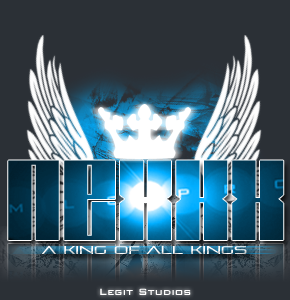
<style>
.page{position:relative;width:290px;height:300px;background:#2b3036}
.page>*{position:absolute;margin:0}
.t1{font:105.4px "Tagmarker";scale:1.28 1}
.t2{font:11.3px "PirulenRg-Regular";scale:1.23 1}
.t3{font:12px "BankGothicBT-Medium";color:#ffffff}
</style>
<div class="page">
<p class="t1" style="left:8px;top:160px;width:276px;height:80px">NexXx</p>
<p class="t2" style="left:41px;top:246px;width:206px;height:8px">A King Of ALL Kings</p>
<p class="t3" style="left:100px;top:288px;width:91px;height:7px">Legit Studios</p>
</div>
